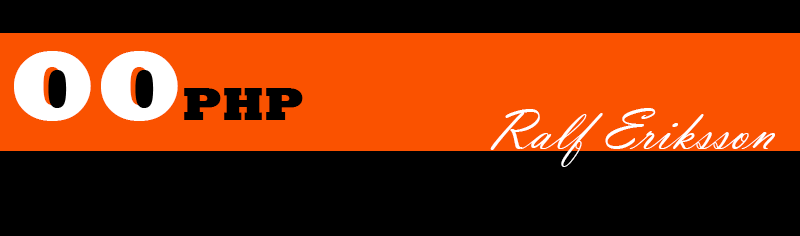
<style>
.page{position:relative;width:800px;height:236px;background:#000000}
.page>*{position:absolute;margin:0}
.t1{font:48px "Rockwell-ExtraBold";color:#000000}
.t2{font:100px "Rockwell-ExtraBold";color:#ffffff}
.t3{font:60px "VladimirScript";color:#ffffff}
</style>
<div class="page">
<p class="t1" style="left:14px;top:51px;width:289px;height:70px"><span class="t2">OO</span>PHP</p>
<p class="t3" style="left:490px;top:108px;width:285px;height:59px">Ralf Eriksson</p>
</div>
